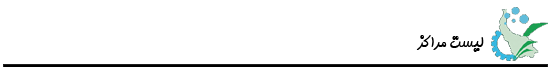
<style>
.page{position:relative;width:548px;height:71px;background:#ffffff}
.page>*{position:absolute;margin:0}
.t1{font:16px "BMorvarid";color:#000000}
</style>
<div class="page">
<p class="t1" style="left:416px;top:35px;width:68px;height:17px">لیست مراکز</p>
</div>
